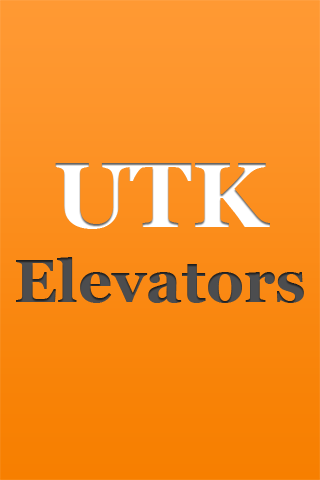
<style>
.page{position:relative;width:320px;height:480px}
.page>*{position:absolute;margin:0}
.t1{font:60px/75px "Georgia-Bold";color:#4c4d4f}
.t2{font:91.6px/75px "Georgia-Bold";color:#ffffff}
</style>
<div class="page">
<p class="t1" style="left:16px;top:163px;width:288px;height:140px;text-align:center"><span class="t2">UTK<br></span>Elevators</p>
</div>
